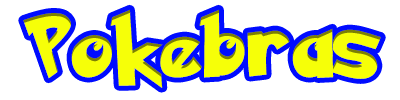
<style>
.page{position:relative;width:400px;height:100px;background:#ffffff}
.page>*{position:absolute;margin:0}
.t1{font:72px "PokemonSolidNormal";letter-spacing:0.09em;color:#f6ff08}
</style>
<div class="page">
<p class="t1" style="left:23px;top:9px;width:358px;height:79px">Pokebras</p>
</div>
